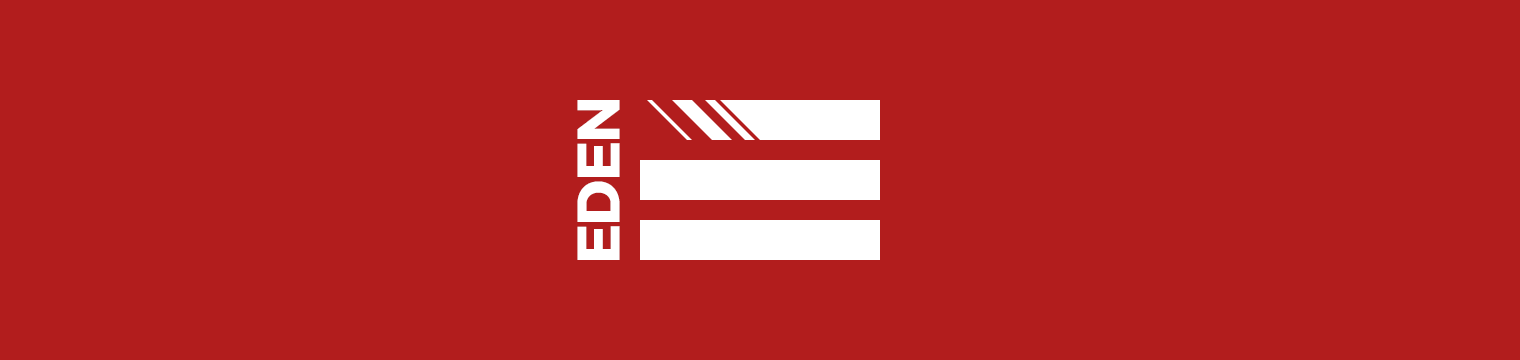
<style>
.page{position:relative;width:1520px;height:360px;background:#b21d1d}
.page>*{position:absolute;margin:0}
.t1{font:60px "Montserrat-Bold";letter-spacing:-0.03em;color:#ffffff}
</style>
<div class="page">
<p class="t1" style="left:577px;top:100px;width:43px;height:160px;rotate:-90deg">EDEN</p>
</div>
